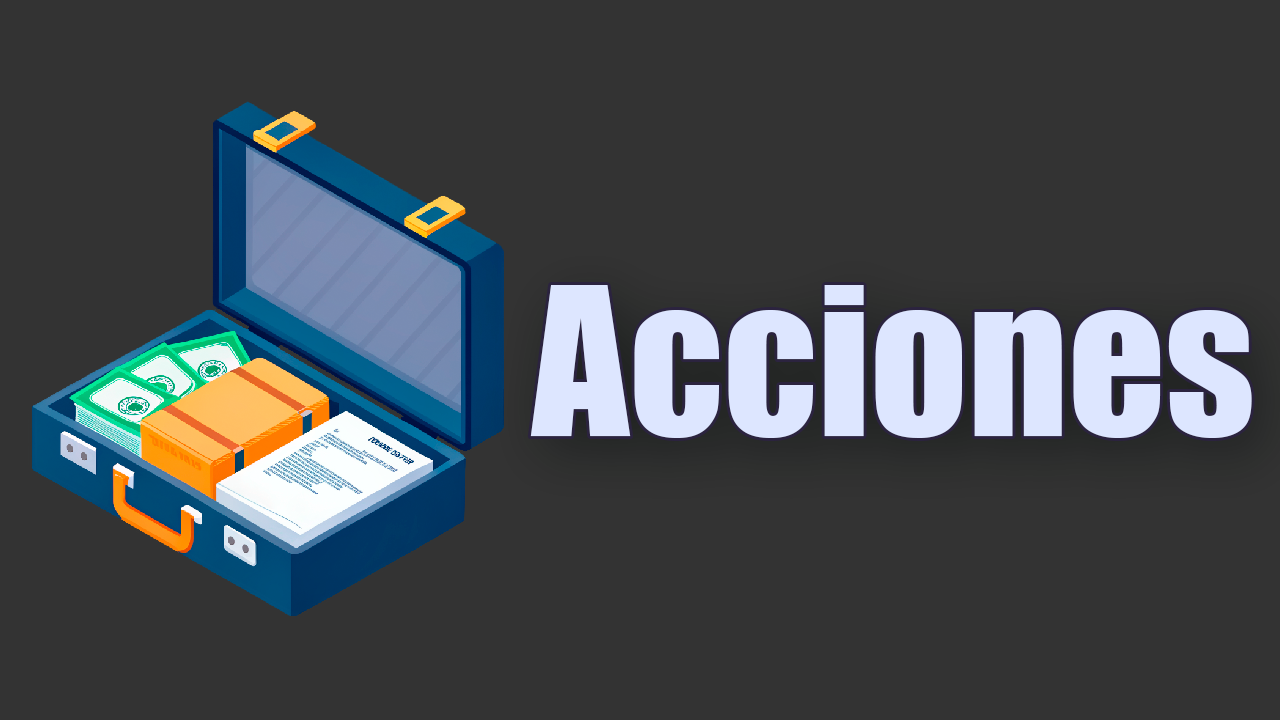
<style>
.page{position:relative;width:1280px;height:720px;background:#333333}
.page>*{position:absolute;margin:0}
.t1{font:191px "Impact";color:#dde6ff}
</style>
<div class="page">
<p class="t1" style="left:530px;top:285px;width:722px;height:153px">Acciones</p>
</div>
